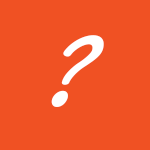
<style>
.page{position:relative;width:150px;height:150px;background:#f05123}
.page>*{position:absolute;margin:0}
.t1{font:122px "Damion";color:#ffffff}
</style>
<div class="page">
<p class="t1" style="left:51px;top:35px;width:53px;height:72px">?</p>
</div>
